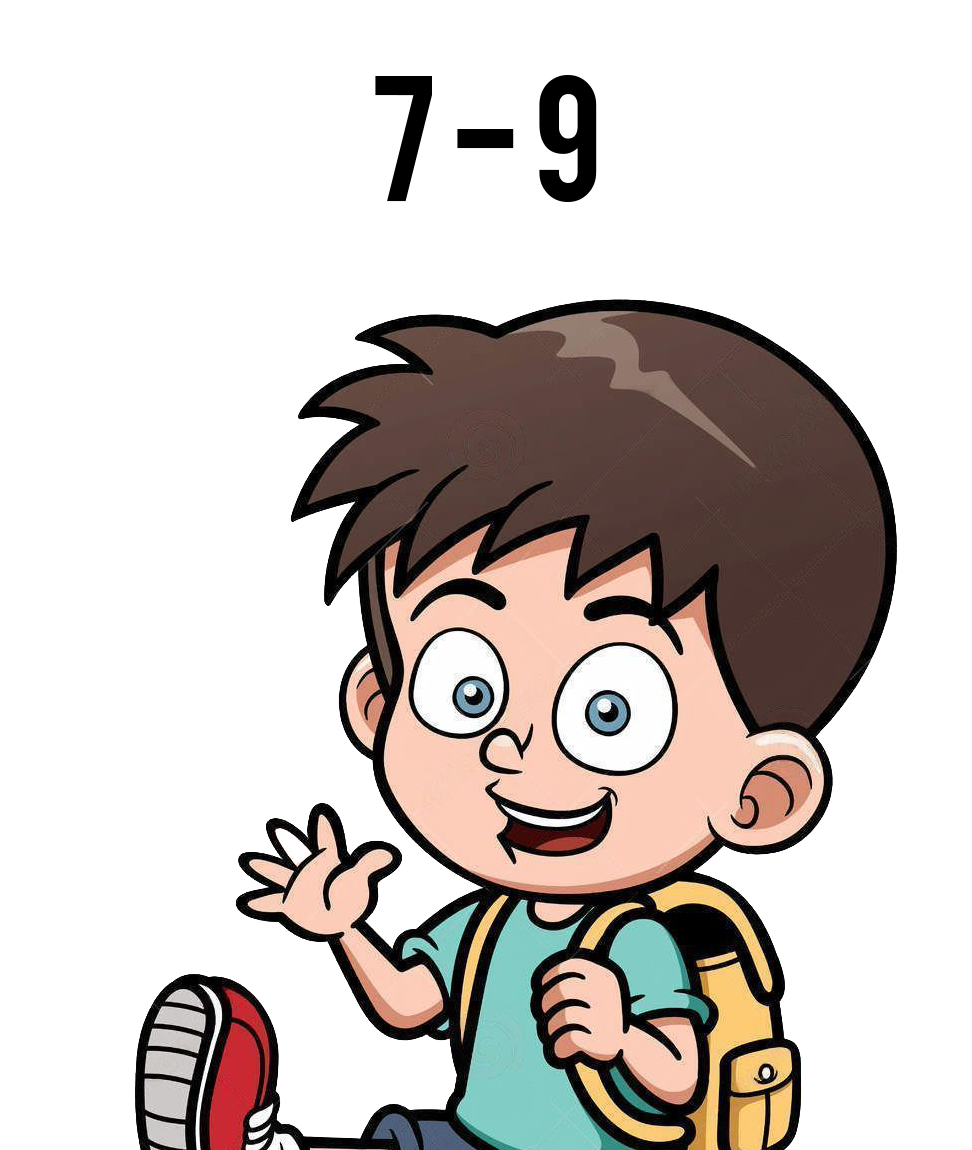
<style>
.page{position:relative;width:972px;height:1150px;background:#ffffff}
.page>*{position:absolute;margin:0}
.t1{font:140px "Bebas";color:#000000}
</style>
<div class="page">
<p class="t1" style="left:375px;top:75px;width:222px;height:127px">7 - 9</p>
</div>
